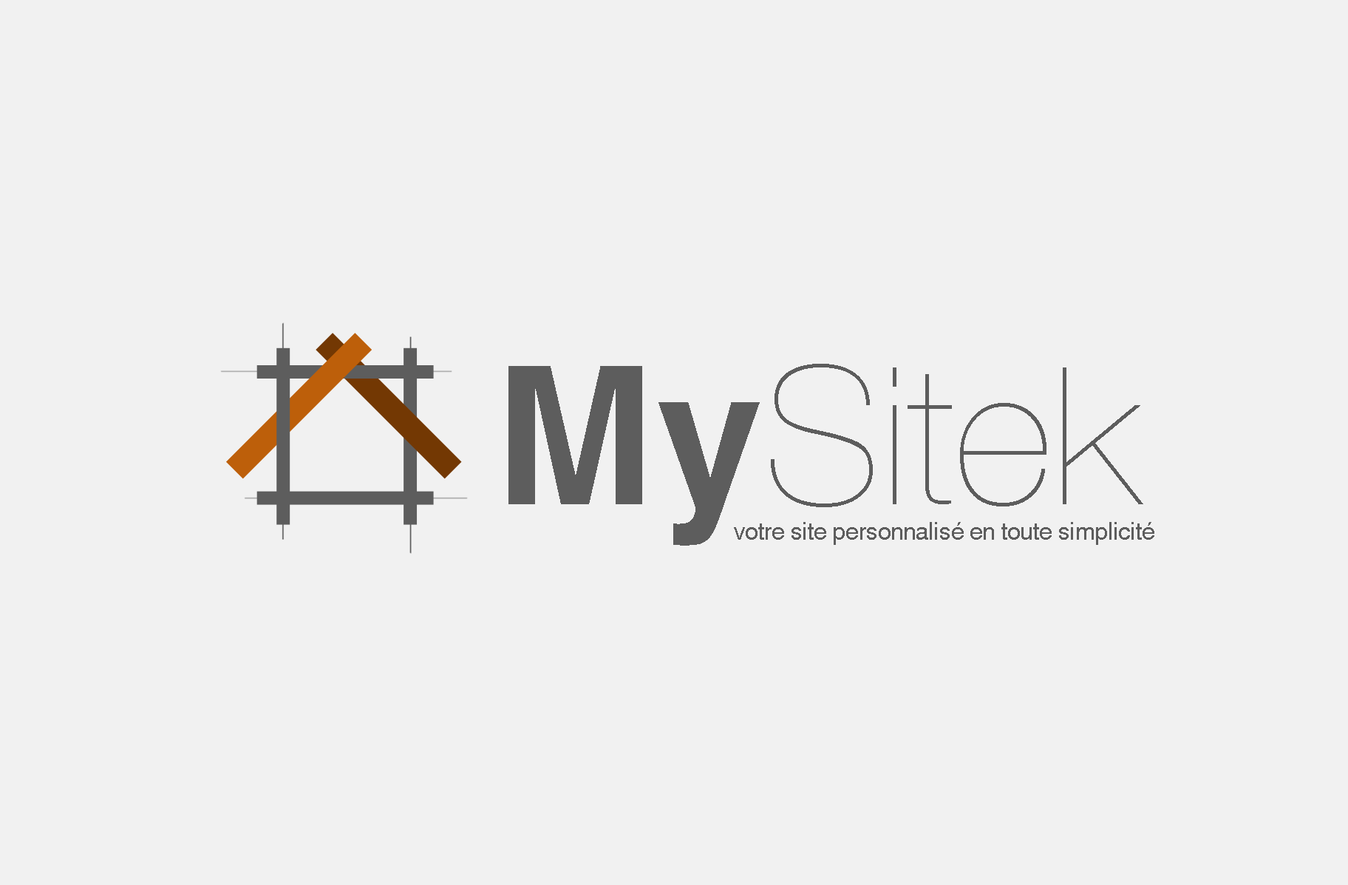
<style>
.page{position:relative;width:1348px;height:885px;background:#f1f1f1}
.page>*{position:absolute;margin:0}
.t1{font:192.1px "HelvNueUltLight";letter-spacing:0.005em;color:#5d5d5d}
.t2{font:192.1px "Helvetica-Bold";letter-spacing:0.005em;color:#5d5d5d}
.t3{font:23.6px "HelveticaWorld-Regular";letter-spacing:-0.01em;color:#5d5d5d}
</style>
<div class="page">
<p class="t1" style="left:508px;top:364px;width:635px;height:181px"><span class="t2">My</span>Sitek</p>
<p class="t3" style="left:734px;top:522px;width:420px;height:23px">votre site personnalisé en toute simplicité</p>
</div>
